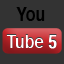
<style>
.page{position:relative;width:64px;height:64px;background:#333333}
.page>*{position:absolute;margin:0}
.t1{font:19.2px "Helvetica-Bold";color:#000000;scale:0.83 1}
.t2{font:19.2px "Helvetica-Bold";color:#ffffff;scale:0.83 1}
.t3{font:19.2px "Helvetica-Bold";color:#ffffff;font-weight:bold;scale:0.83 1}
</style>
<div class="page">
<p class="t1" style="left:16px;top:7px;width:29px;height:14px">You</p>
<p class="t2" style="left:6px;top:34px;width:51px;height:15px">Tube <span class="t3">5</span></p>
</div>
